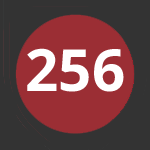
<style>
.page{position:relative;width:150px;height:150px;background:#333333}
.page>*{position:absolute;margin:0}
.t1{font:58.3px "OpenSans-Bold";color:#ffffff;text-transform:uppercase}
</style>
<div class="page">
<p class="t1" style="left:27px;top:48px;width:97px;height:44px">256</p>
</div>
